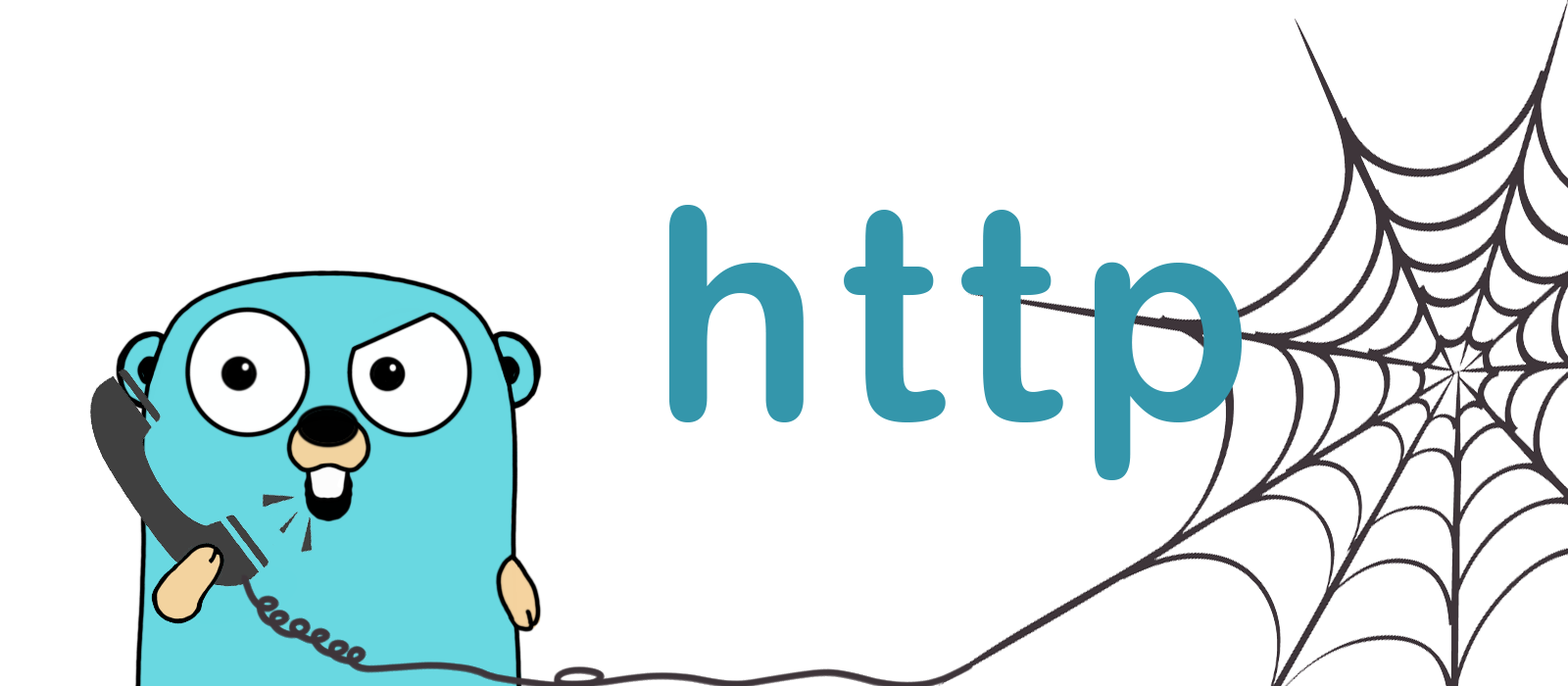
<style>
.page{position:relative;width:1568px;height:686px;background:#ffffff}
.page>*{position:absolute;margin:0}
.t1{font:294px "ArialRoundedMTBold";letter-spacing:0.065em;color:#3496ab;scale:0.96 1}
</style>
<div class="page">
<p class="t1" style="left:668px;top:205px;width:575px;height:275px">http</p>
</div>
